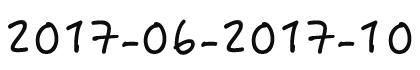
<style>
.page{position:relative;width:420px;height:70px;background:#ffffff}
.page>*{position:absolute;margin:0}
.t1{font:48px "HanziPenSC-W5";color:#0e0d0d}
</style>
<div class="page">
<p class="t1" style="left:8px;top:19px;width:404px;height:36px">2017-06-2017-10</p>
</div>
